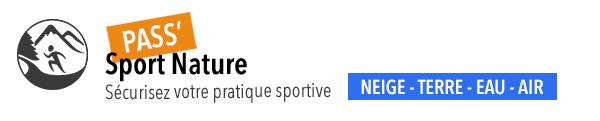
<style>
.page{position:relative;width:600px;height:121px;background:#ffffff}
.page>*{position:absolute;margin:0}
.t1{font:30px "AvenirNextCondensed-DemiBold";color:#f9faf7}
.t2{font:30px "AvenirNextCondensed-DemiBold";color:#000000}
.t3{font:20px "AvenirNextCondensed-Regular";color:#3a3a3a}
.t4{font:20px "AvenirNextCondensed-DemiBold";color:#ffffff}
</style>
<div class="page">
<p class="t1" style="left:122px;top:21px;width:59px;height:32px;rotate:-10deg">PASS’</p>
<p class="t2" style="left:105px;top:52px;width:142px;height:30px">Sport Nature</p>
<p class="t3" style="left:105px;top:83px;width:226px;height:20px;rotate:-1deg">Sécurisez votre pratique sportive</p>
<p class="t4" style="left:361px;top:79px;width:183px;height:16px">NEIGE - TERRE - EAU - AIR</p>
</div>
